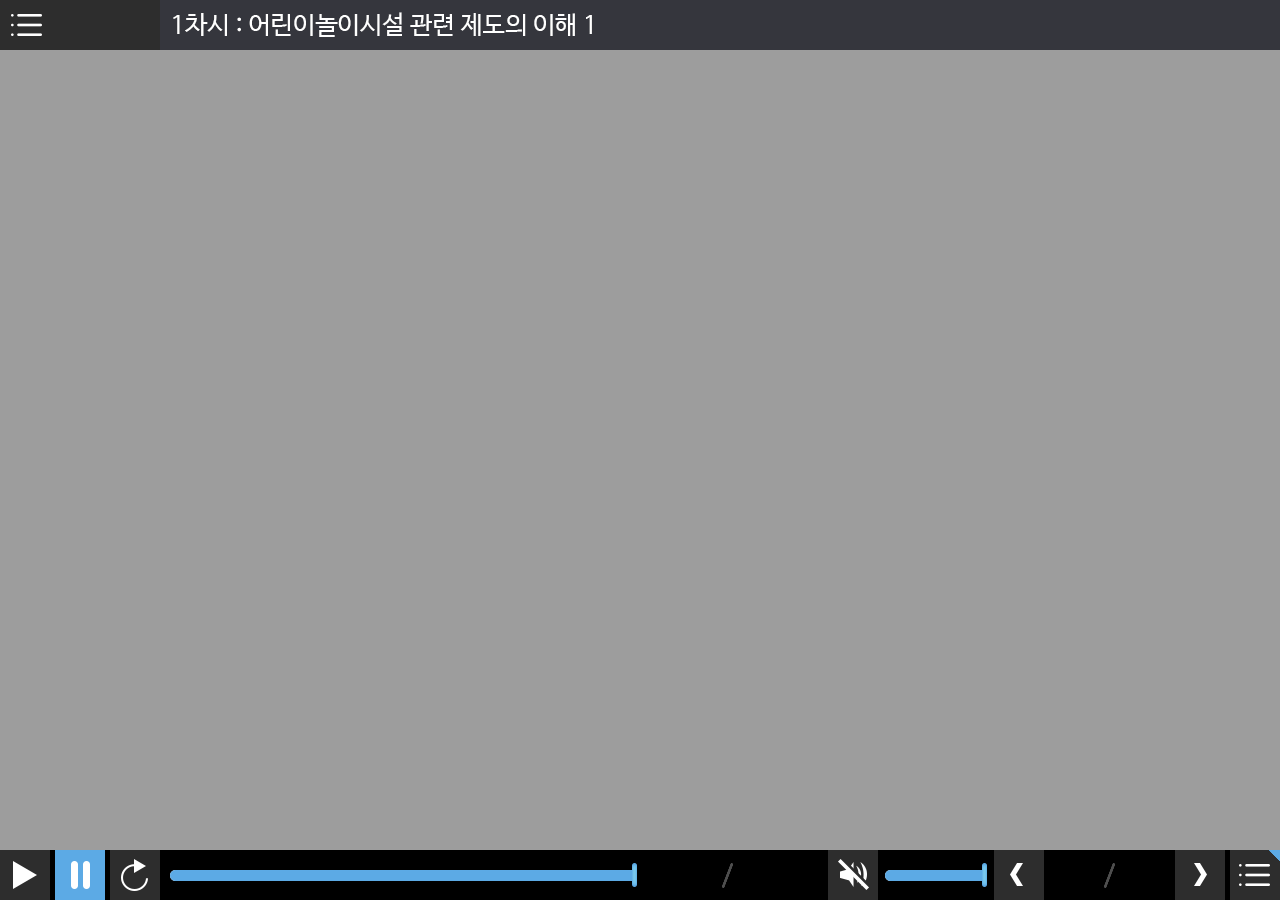
<style>
.page{position:relative;width:1280px;height:900px;background:#9d9d9d}
.page>*{position:absolute;margin:0}
.t1{font:25px "NanumBarunGothic";color:#ffffff}
</style>
<div class="page">
<p class="t1" style="left:173px;top:12px;width:419px;height:25px">1차시 : 어린이놀이시설 관련 제도의 이해 1</p>
</div>
